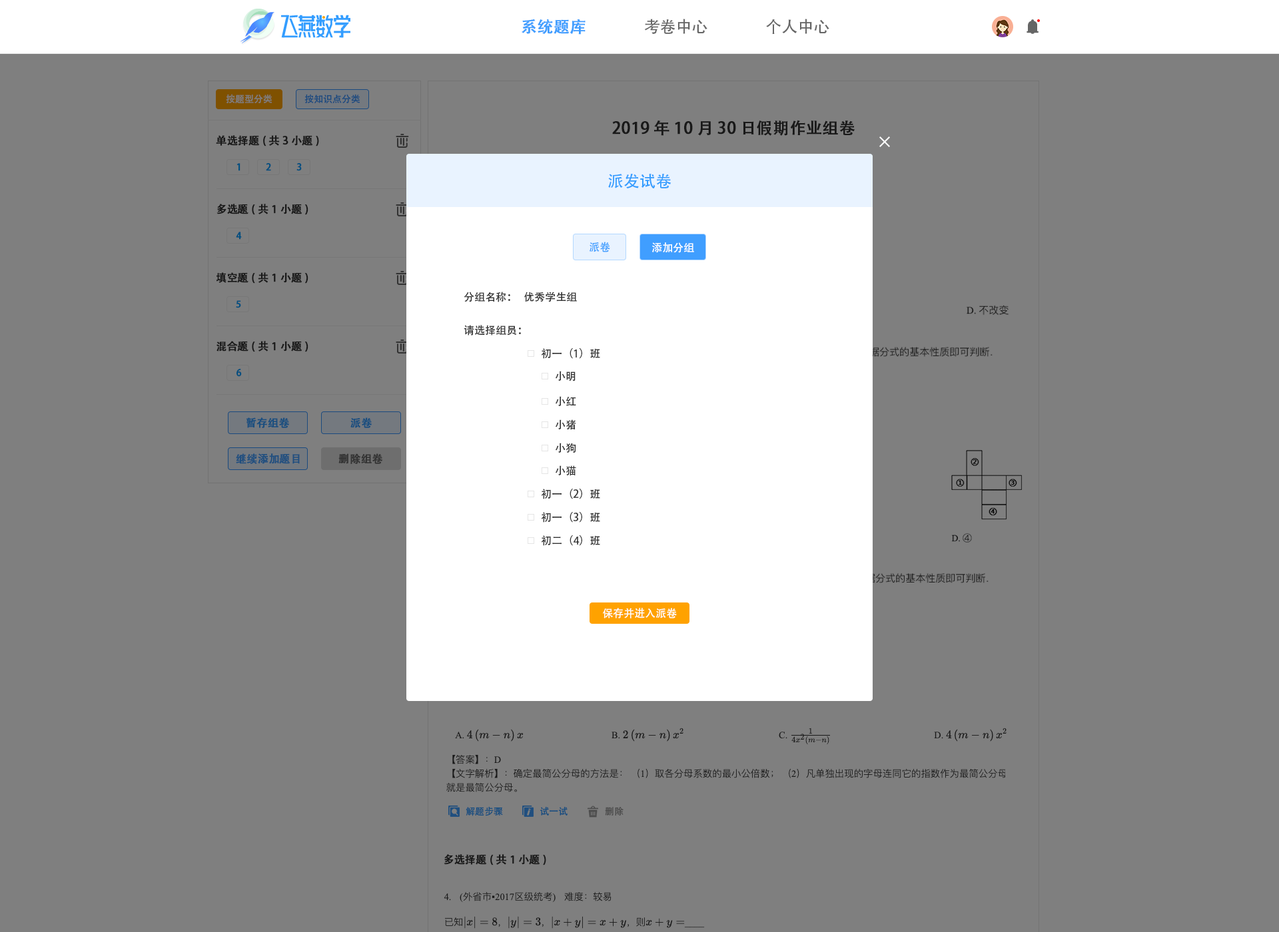
<style>
.page{position:relative;width:1279px;height:932px;background:#7f7f7f}
.page>*{position:absolute;margin:0}
.t1{font:16px "AdobeHeitiStd-Regular";color:#409eff;font-weight:bold}
.t2{font:16px "AdobeHeitiStd-Regular";color:#666666}
.t3{font:9.3px "AdobeHeitiStd-Regular";color:#7f7f7f}
.t4{font:9.3px "AdobeHeitiStd-Regular";color:#1b4a7f}
.t5{font:16px "AdobeHeitiStd-Regular";color:#191919;font-weight:bold}
.t6{font:10.7px "AdobeHeitiStd-Regular";color:#191919;font-weight:bold}
.t7{font:9.3px "AdobeHeitiStd-Regular";color:#024f7f;font-weight:bold}
.t8{font:16px "AdobeHeitiStd-Regular";color:#339dff}
.t9{font:10.7px "AdobeHeitiStd-Regular";color:#409eff}
.t10{font:10.7px "AdobeHeitiStd-Regular";color:#ffffff}
.t11{font:10.7px "AdobeHeitiStd-Regular";color:#333333}
.t12{font:10.7px "AdobeHeitiStd-Regular";color:#194e7f;font-weight:bold}
.t13{font:10.7px "AdobeHeitiStd-Regular";color:#204f7f;font-weight:bold}
.t14{font:10.7px "AdobeHeitiStd-Regular";color:#333333;font-weight:bold}
.t15{font:9.3px "AdobeHeitiStd-Regular";color:#194e7f}
.t16{font:9.3px "AdobeHeitiStd-Regular";color:#4c4c4c}
</style>
<div class="page">
<p class="t1" style="left:522px;top:19px;width:63px;height:16px">系统题库</p>
<p class="t2" style="left:644px;top:19px;width:63px;height:15px">考卷中心</p>
<p class="t2" style="left:766px;top:19px;width:63px;height:15px">个人中心</p>
<p class="t3" style="left:226px;top:94px;width:46px;height:10px">按题型分类</p>
<p class="t4" style="left:304px;top:94px;width:56px;height:10px">按知识点分类</p>
<p class="t5" style="left:612px;top:120px;width:243px;height:16px">2019年10月30日假期作业组卷</p>
<p class="t6" style="left:216px;top:135px;width:103px;height:12px">单选择题(共3小题)</p>
<p class="t7" style="left:236px;top:163px;width:4px;height:8px">1</p>
<p class="t7" style="left:266px;top:163px;width:5px;height:8px">2</p>
<p class="t7" style="left:296px;top:163px;width:6px;height:8px">3</p>
<p class="t8" style="left:608px;top:174px;width:63px;height:14px">派发试卷</p>
<p class="t6" style="left:216px;top:204px;width:92px;height:11px">多选题(共1小题)</p>
<p class="t7" style="left:236px;top:232px;width:6px;height:8px">4</p>
<p class="t9" style="left:589px;top:242px;width:21px;height:10px">派卷</p>
<p class="t10" style="left:652px;top:242px;width:42px;height:11px">添加分组</p>
<p class="t6" style="left:216px;top:272px;width:92px;height:12px">填空题(共1小题)</p>
<p class="t11" style="left:464px;top:292px;width:46px;height:10px">分组名称：</p>
<p class="t11" style="left:524px;top:292px;width:53px;height:10px">优秀学生组</p>
<p class="t7" style="left:236px;top:300px;width:5px;height:8px">5</p>
<p class="t11" style="left:464px;top:325px;width:57px;height:11px">请选择组员：</p>
<p class="t6" style="left:216px;top:341px;width:92px;height:11px">混合题(共1小题)</p>
<p class="t11" style="left:541px;top:348px;width:59px;height:11px">初一（1）班</p>
<p class="t7" style="left:236px;top:369px;width:6px;height:8px">6</p>
<p class="t11" style="left:555px;top:371px;width:20px;height:11px">小明</p>
<p class="t11" style="left:555px;top:396px;width:21px;height:10px">小红</p>
<p class="t12" style="left:246px;top:418px;width:44px;height:10px">暂存组卷</p>
<p class="t12" style="left:350px;top:418px;width:22px;height:10px">派卷</p>
<p class="t11" style="left:555px;top:420px;width:21px;height:10px">小猪</p>
<p class="t11" style="left:555px;top:443px;width:21px;height:10px">小狗</p>
<p class="t13" style="left:236px;top:454px;width:64px;height:10px">继续添加题目</p>
<p class="t14" style="left:338px;top:454px;width:45px;height:10px">删除组卷</p>
<p class="t11" style="left:555px;top:466px;width:21px;height:10px">小猫</p>
<p class="t11" style="left:541px;top:489px;width:59px;height:11px">初一（2）班</p>
<p class="t11" style="left:541px;top:512px;width:59px;height:11px">初一（3）班</p>
<p class="t11" style="left:541px;top:535px;width:59px;height:11px">初二（4）班</p>
<p class="t10" style="left:603px;top:608px;width:74px;height:11px">保存并进入派卷</p>
<p class="t15" style="left:466px;top:807px;width:37px;height:10px">解题步骤</p>
<p class="t15" style="left:540px;top:807px;width:27px;height:9px">试一试</p>
<p class="t16" style="left:605px;top:807px;width:18px;height:9px">删除</p>
<p class="t6" style="left:444px;top:855px;width:102px;height:11px">多选择题(共1小题)</p>
</div>
